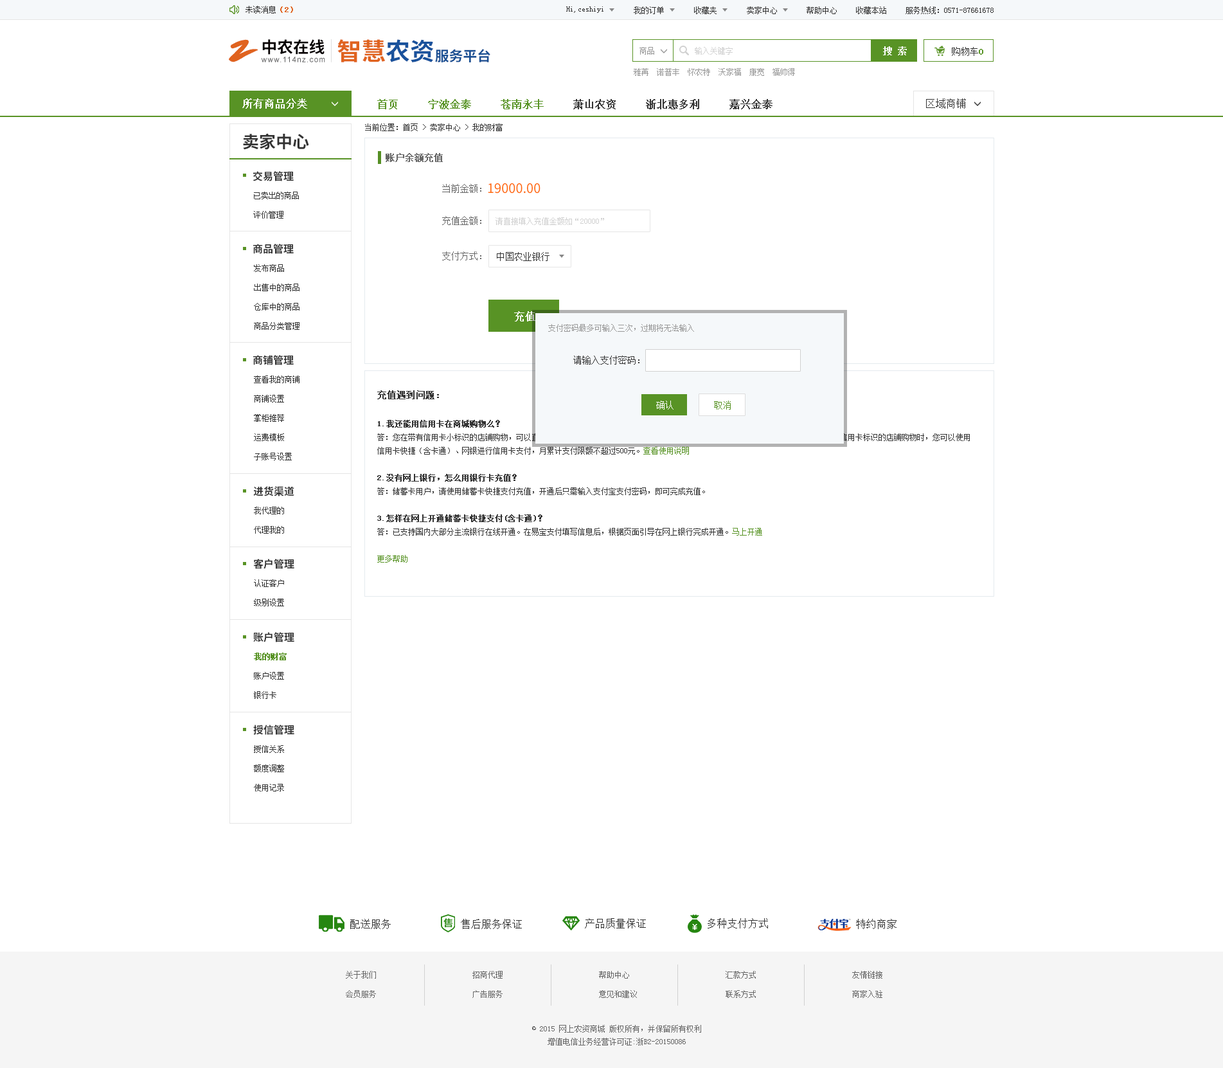
<style>
.page{position:relative;width:1223px;height:1068px;background:#ffffff}
.page>*{position:absolute;margin:0}
.t1{font:7.7px "SimSun";color:#333333}
.t2{font:7.7px "SimSun";color:#e0631f;font-weight:bold}
.t3{font:32.6px "SmudgerLetPlain";color:#e0631f}
.t4{font:15.9px "SourceHanSansCN-Bold";color:#060001}
.t5{font:24.3px "SourceHanSansCN-Bold";color:#e0631f}
.t6{font:24.3px "SourceHanSansCN-Bold";color:#1a529c}
.t7{font:14px "SourceHanSansCN-Bold";color:#194f93}
.t8{font:7.7px "SimSun";color:#999999}
.t9{font:7.7px "SimSun";color:#d1d1d1}
.t10{font:9px "SimSun";color:#ffffff;font-weight:bold}
.t11{font:9px "SimSun";color:#333333}
.t12{font:9px "SimSun";color:#589325;font-weight:bold}
.t13{font:7.6px "ArialMT";letter-spacing:0.1em;color:#585859}
.t14{font:10.3px "SimSun";color:#ffffff;font-weight:bold}
.t15{font:10.3px "SimSun";color:#333333;font-weight:bold}
.t16{font:10.3px "SimSun";color:#589325;font-weight:bold}
.t17{font:10.3px "SimSun";color:#333333}
.t18{font:16.7px "SourceHanSansCN-Bold";color:#333333}
.t19{font:9px "SimSun";color:#666666;font-weight:bold}
.t20{font:10.3px "SourceHanSansCN-Bold";color:#333333}
.t21{font:9px "SimSun";color:#666666}
.t22{font:12.9px "SourceHanSansCN-Regular";color:#ff6600}
.t23{font:7.7px/19.3px "SimSun";color:#333333}
.t24{font:9px "SimSun";color:#333333;font-weight:bold}
.t25{font:7.7px "SimSun";color:#333333;font-weight:bold}
.t26{font:7.7px "SimSun";color:#589325}
.t27{font:9px "SimSun";color:#ffffff}
.t28{font:9px "SimSun";color:#589325}
.t29{font:7.7px/19.3px "SimSun";color:#589325;font-weight:bold}
.t30{font:7.7px/19.3px "SimSun";color:#666666}
.t31{font:7.7px/12.9px "SimSun";color:#666666}
</style>
<div class="page">
<p class="t1" style="left:246px;top:6px;width:47px;height:8px">未读消息<span class="t2">（2）</span></p>
<p class="t1" style="left:566px;top:6px;width:38px;height:7px">Hi,ceshiyi</p>
<p class="t1" style="left:634px;top:6px;width:30px;height:8px">我的订单</p>
<p class="t1" style="left:694px;top:6px;width:23px;height:8px">收藏夹</p>
<p class="t1" style="left:747px;top:6px;width:30px;height:8px">卖家中心</p>
<p class="t1" style="left:807px;top:6px;width:30px;height:8px">帮助中心</p>
<p class="t1" style="left:856px;top:6px;width:31px;height:8px">收藏本站</p>
<p class="t1" style="left:906px;top:6px;width:88px;height:8px">服务热线：0571-87661678</p>
<p class="t3" style="left:229px;top:39px;width:29px;height:23px">Z</p>
<p class="t4" style="left:262px;top:39px;width:63px;height:16px">中农在线</p>
<p class="t5" style="left:338px;top:39px;width:96px;height:23px">智慧<span class="t6">农资</span></p>
<p class="t7" style="left:435px;top:49px;width:56px;height:13px">服务平台</p>
<p class="t8" style="left:640px;top:47px;width:14px;height:8px">商品</p>
<p class="t9" style="left:695px;top:47px;width:38px;height:8px">输入关键字</p>
<p class="t10" style="left:883px;top:46px;width:24px;height:9px">搜 索</p>
<p class="t11" style="left:952px;top:47px;width:32px;height:9px">购物车<span class="t12">0</span></p>
<p class="t13" style="left:261px;top:57px;width:64px;height:5px">www.114nz.com</p>
<p class="t8" style="left:634px;top:68px;width:161px;height:8px">雅苒  诺普丰  怀农特  沃家福  康宽  福帅得</p>
<p class="t14" style="left:242px;top:98px;width:65px;height:11px">所有商品分类</p>
<p class="t15" style="left:377px;top:99px;width:396px;height:10px"><span class="t16">首页     宁波金泰     苍南永丰    </span> 萧山农资     浙北惠多利     嘉兴金泰</p>
<p class="t17" style="left:926px;top:98px;width:40px;height:11px">区域商铺</p>
<p class="t1" style="left:365px;top:123px;width:138px;height:8px">当前位置：首页 &gt; 卖家中心 &gt; 我的财富</p>
<p class="t18" style="left:243px;top:133px;width:66px;height:17px">卖家中心</p>
<p class="t19" style="left:386px;top:153px;width:57px;height:9px">账户余额充值</p>
<p class="t20" style="left:253px;top:171px;width:41px;height:10px">交易管理</p>
<p class="t21" style="left:442px;top:184px;width:40px;height:9px">当前金额：</p>
<p class="t22" style="left:488px;top:183px;width:53px;height:11px">19000.00</p>
<p class="t23" style="left:253px;top:192px;width:46px;height:27px">已卖出的商品<br>评价管理</p>
<p class="t21" style="left:442px;top:216px;width:40px;height:9px">充值金额：</p>
<p class="t9" style="left:496px;top:217px;width:108px;height:8px">请直接填入充值金额如“20000”</p>
<p class="t20" style="left:253px;top:244px;width:41px;height:10px">商品管理</p>
<p class="t21" style="left:442px;top:251px;width:40px;height:9px">支付方式：</p>
<p class="t11" style="left:497px;top:252px;width:53px;height:9px">中国农业银行</p>
<p class="t23" style="left:254px;top:264px;width:46px;height:66px">发布商品<br>出售中的商品<br>仓库中的商品<br>商品分类管理</p>
<p class="t14" style="left:514px;top:311px;width:22px;height:10px">充值</p>
<p class="t8" style="left:548px;top:324px;width:146px;height:8px">支付密码最多可输入三次，过期将无法输入</p>
<p class="t20" style="left:253px;top:355px;width:41px;height:10px">商铺管理</p>
<p class="t11" style="left:573px;top:356px;width:67px;height:8px">请输入支付密码：</p>
<p class="t23" style="left:254px;top:375px;width:46px;height:85px">查看我的商铺<br>商铺设置<br>掌柜推荐<br>运费模板<br>子账号设置</p>
<p class="t1" style="left:377px;top:390px;width:593px;height:172px"><span class="t24">充值遇到问题：<br><br></span><span class="t25">1.我还能用信用卡在商城购物么？<br></span>答：您在带有信用卡小标识的店铺购物，可以直接使用信用卡快捷（含卡通）、网银进行信用卡支付，支付限额为您的卡面额度。在没有信用卡标识的店铺购物时，您可以使用<br>信用卡快捷（含卡通）、网银进行信用卡支付，月累计支付限额不超过500元。<span class="t26">查看使用说明<br><br></span><span class="t25">2.没有网上银行，怎么用银行卡充值？<br></span>答：储蓄卡用户，请使用储蓄卡快捷支付充值，开通后只需输入支付宝支付密码，即可完成充值。<br><br><span class="t25">3.怎样在网上开通储蓄卡快捷支付(含卡通)？<br></span>答：已支持国内大部分主流银行在线开通。在易宝支付填写信息后，根据页面引导在网上银行完成开通。<span class="t26">马上开通<br><br>更多帮助</span></p>
<p class="t27" style="left:656px;top:401px;width:18px;height:9px">确认</p>
<p class="t28" style="left:714px;top:401px;width:17px;height:9px">取消</p>
<p class="t20" style="left:253px;top:486px;width:41px;height:10px">进货渠道</p>
<p class="t23" style="left:254px;top:507px;width:30px;height:27px">我代理的<br>代理我的</p>
<p class="t20" style="left:253px;top:559px;width:41px;height:10px">客户管理</p>
<p class="t23" style="left:254px;top:579px;width:30px;height:27px">认证客户<br>级别设置</p>
<p class="t20" style="left:253px;top:632px;width:41px;height:10px">账户管理</p>
<p class="t23" style="left:254px;top:652px;width:33px;height:47px"><span class="t29">我的财富<br></span>账户设置<br>银行卡</p>
<p class="t20" style="left:253px;top:724px;width:41px;height:11px">授信管理</p>
<p class="t23" style="left:254px;top:745px;width:30px;height:46px">授信关系<br>额度调整<br>使用记录</p>
<p class="t17" style="left:350px;top:919px;width:41px;height:10px">配送服务</p>
<p class="t17" style="left:461px;top:919px;width:61px;height:10px">售后服务保证</p>
<p class="t17" style="left:585px;top:918px;width:61px;height:10px">产品质量保证</p>
<p class="t17" style="left:708px;top:918px;width:60px;height:10px">多种支付方式</p>
<p class="t17" style="left:856px;top:919px;width:41px;height:10px">特约商家</p>
<p class="t30" style="left:346px;top:971px;width:30px;height:27px">关于我们<br>会员服务</p>
<p class="t30" style="left:473px;top:971px;width:30px;height:27px">招商代理<br>广告服务</p>
<p class="t30" style="left:599px;top:971px;width:38px;height:27px">帮助中心<br>意见和建议</p>
<p class="t30" style="left:726px;top:971px;width:30px;height:27px">汇款方式<br>联系方式</p>
<p class="t30" style="left:852px;top:971px;width:31px;height:27px">友情链接<br>商家入驻</p>
<p class="t31" style="left:532px;top:1025px;width:169px;height:20px;text-align:center">© 2015 网上农资商城 版权所有，并保留所有权利<br>增值电信业务经营许可证:浙B2-20150086</p>
</div>
